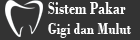
<style>
.page{position:relative;width:140px;height:40px;background:#333333}
.page>*{position:absolute;margin:0}
.t1{font:17.5px "BodoniMT-Bold";color:#ffffff;scale:0.82 1}
.t2{font:15.7px "BodoniMT-Bold";color:#ffffff;scale:0.86 1}
</style>
<div class="page">
<p class="t1" style="left:48px;top:2px;width:78px;height:12px">Sistem Pakar</p>
<p class="t2" style="left:48px;top:23px;width:83px;height:15px">Gigi dan Mulut</p>
</div>
